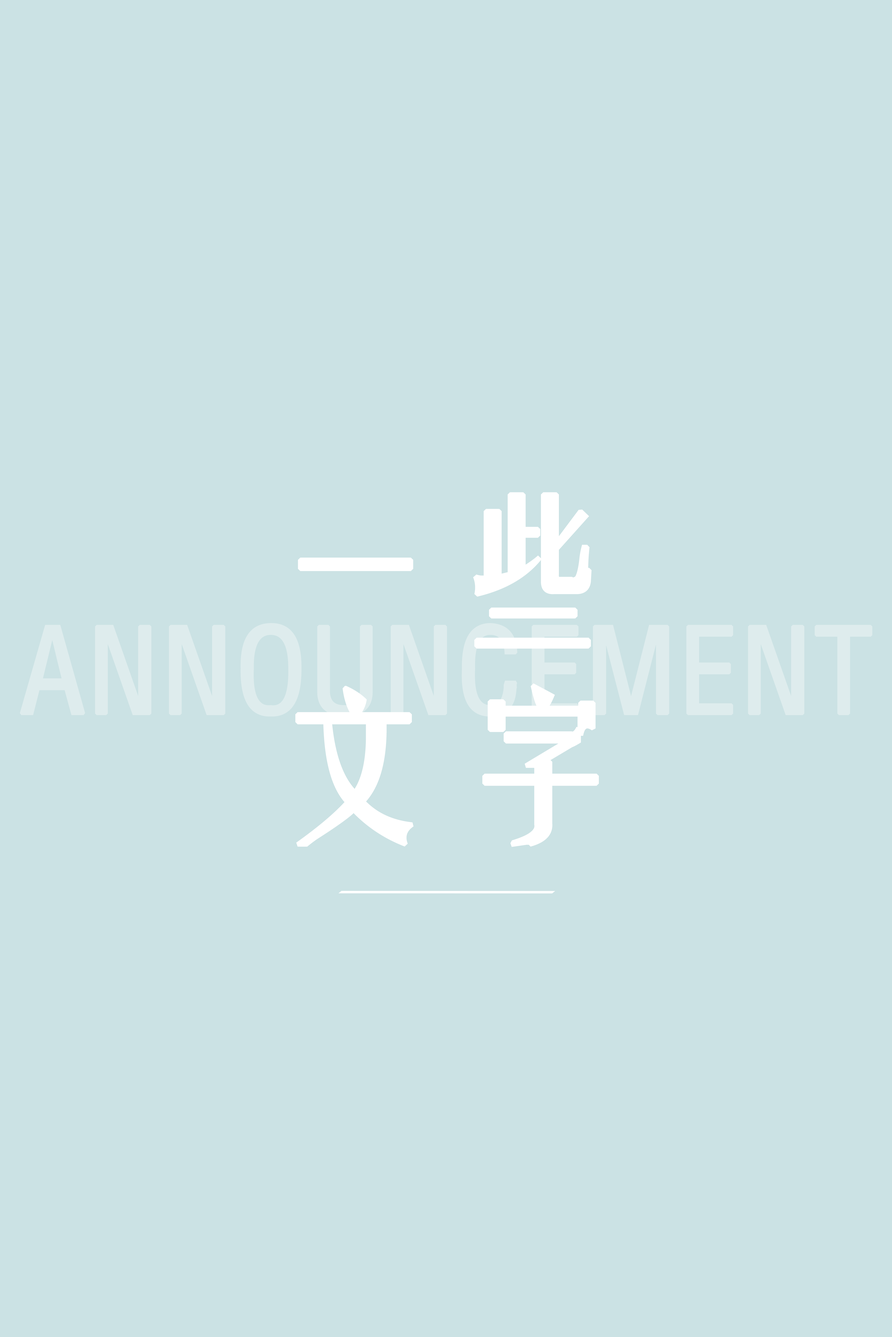
<style>
.page{position:relative;width:892px;height:1337px;background:#cbe2e4}
.page>*{position:absolute;margin:0}
.t1{font:164.1px "FZYTK--GBK1-0";color:#ffffff;font-weight:bold;scale:1.04 1}
.t2{font:116.1px "FZYTK--GBK1-0";color:#deeced;text-transform:uppercase;font-weight:bold}
</style>
<div class="page">
<p class="t1" style="left:295px;top:492px;width:304px;height:355px;text-align:center">一些<br>文字</p>
<p class="t2" style="left:20px;top:623px;width:852px;height:94px">announcement</p>
</div>
